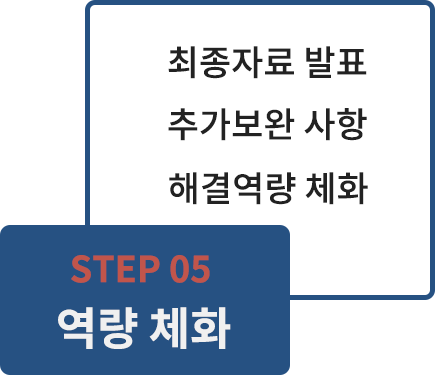
<style>
.page{position:relative;width:435px;height:375px;background:#ffffff}
.page>*{position:absolute;margin:0}
.t1{font:35px "NotoSansCJKkr-Medium";color:#222222}
.t2{font:36px "NotoSansCJKkr-Bold";color:#c1554b}
.t3{font:45px "NotoSansCJKkr-Bold";color:#f0f0f0}
</style>
<div class="page">
<p class="t1" style="left:168px;top:46px;width:199px;height:33px">최종자료 발표</p>
<p class="t1" style="left:168px;top:108px;width:199px;height:33px">추가보완 사항</p>
<p class="t1" style="left:169px;top:172px;width:199px;height:33px">해결역량 체화</p>
<p class="t2" style="left:71px;top:255px;width:139px;height:28px">STEP 05</p>
<p class="t3" style="left:58px;top:307px;width:173px;height:42px">역량 체화</p>
</div>
